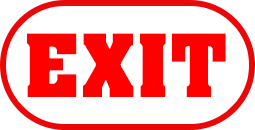
<style>
.page{position:relative;width:255px;height:130px;background:#ffffff}
.page>*{position:absolute;margin:0}
.t1{font:83.3px "AcmeFont";color:#ff0000}
</style>
<div class="page">
<p class="t1" style="left:27px;top:33px;width:199px;height:64px">EXIT</p>
</div>
